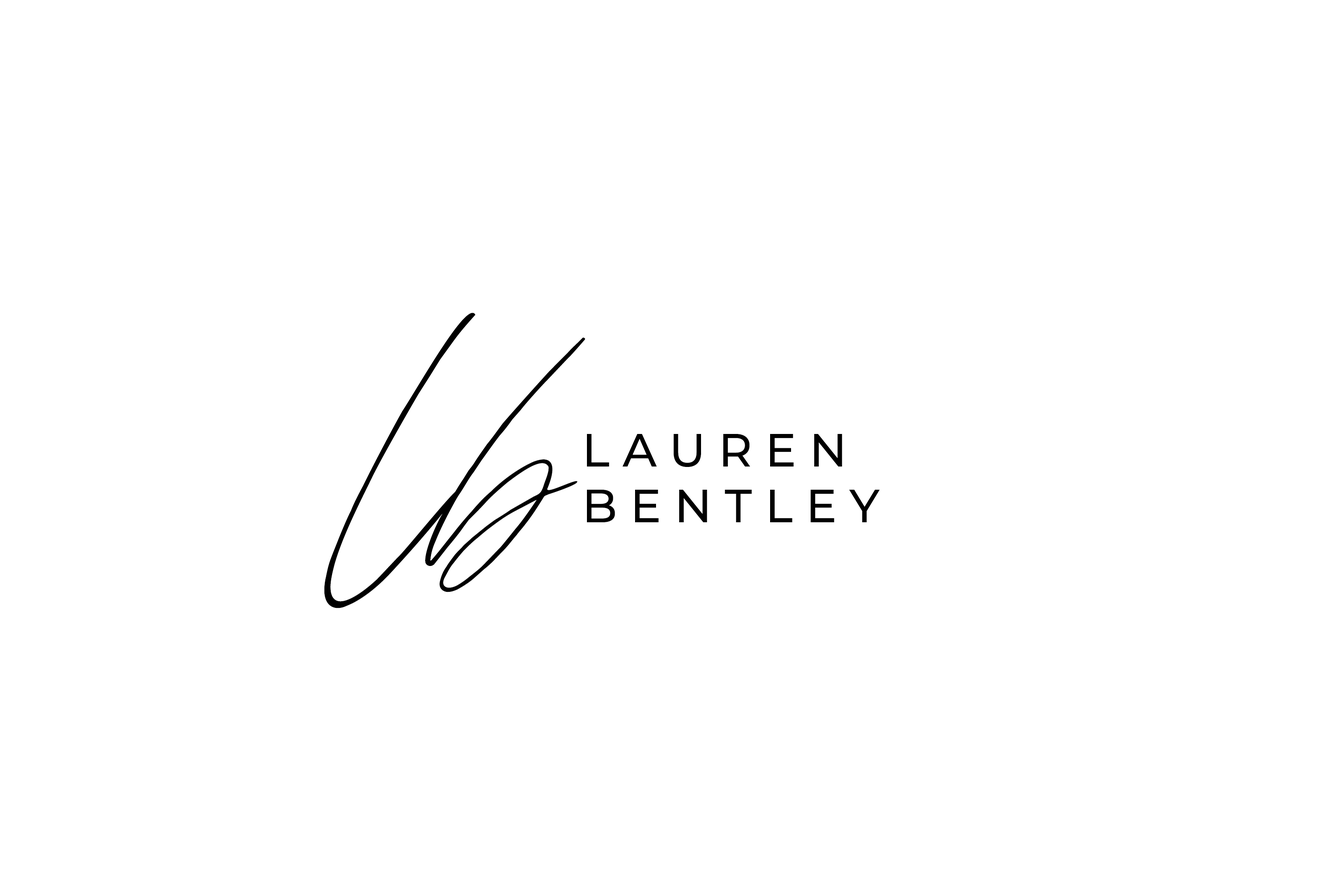
<style>
.page{position:relative;width:1337px;height:892px;background:#ffffff}
.page>*{position:absolute;margin:0}
.t1{font:501.5px "xoBabe-Regular";color:#000000}
.t2{font:46.4px/55.7px "Montserrat-Medium";letter-spacing:0.28em;color:#000000}
</style>
<div class="page">
<p class="t1" style="left:324px;top:313px;width:261px;height:295px">lb</p>
<p class="t2" style="left:587px;top:434px;width:293px;height:88px">LAUREN<br>BENTLEY</p>
</div>
